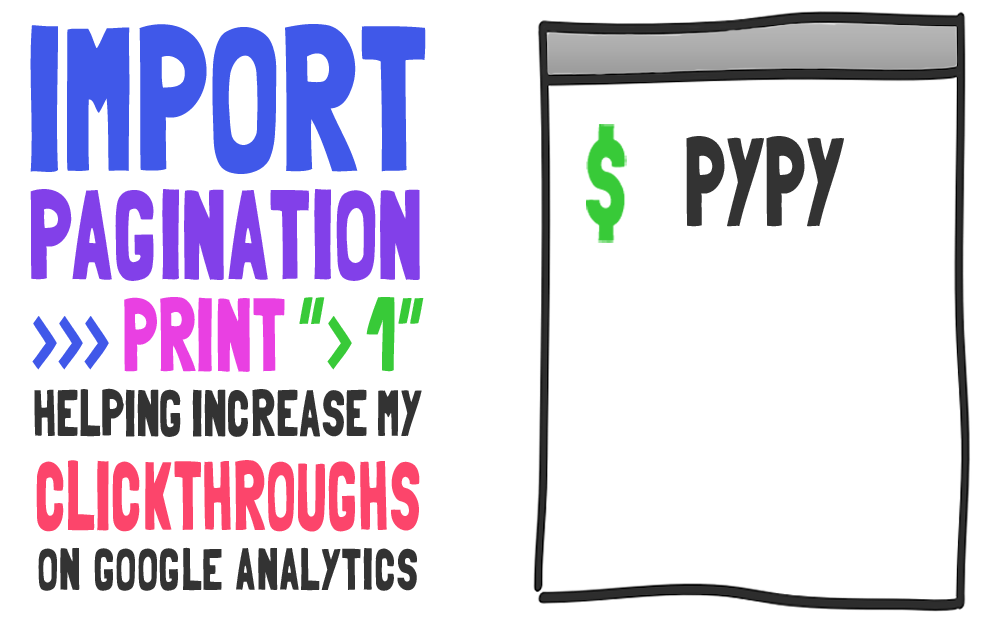
<style>
.page{position:relative;width:1000px;height:632px;background:#ffffff}
.page>*{position:absolute;margin:0}
.t1{font:205.4px "Folk-solid";color:#4058e9;scale:0.73 1}
.t2{font:126.4px "Folk-solid";color:#333333;scale:0.67 1}
.t3{font:126.4px "Folk-solid";color:#8240e9;scale:0.71 1}
.t4{font:103.1px "Folk-solid";color:#e940e2;scale:0.71 1}
.t5{font:103.1px "Folk-solid";color:#4058e9;scale:0.71 1}
.t6{font:103.1px "Folk-solid";color:#38ca38;scale:0.71 1}
.t7{font:65.6px "Folk-solid";color:#333333;scale:0.71 1}
.t8{font:97.5px "Folk-solid";color:#fc456b;scale:0.64 1}
.t9{font:84.3px "Folk-solid";color:#333333;scale:0.73 1}
</style>
<div class="page">
<p class="t1" style="left:30px;top:24px;width:396px;height:150px">IMPORT</p>
<p class="t2" style="left:686px;top:136px;width:158px;height:91px">PYPY</p>
<p class="t3" style="left:30px;top:189px;width:390px;height:92px">PAGINATION</p>
<p class="t4" style="left:32px;top:297px;width:392px;height:75px"><span class="t5">&gt;&gt;&gt; </span>PRINT <span class="t6">“&gt; 1”</span></p>
<p class="t7" style="left:34px;top:388px;width:388px;height:49px">HELPING INCREASE MY</p>
<p class="t8" style="left:36px;top:460px;width:384px;height:72px">CLICKTHROUGHS</p>
<p class="t9" style="left:38px;top:547px;width:379px;height:44px">on google analytics</p>
</div>
